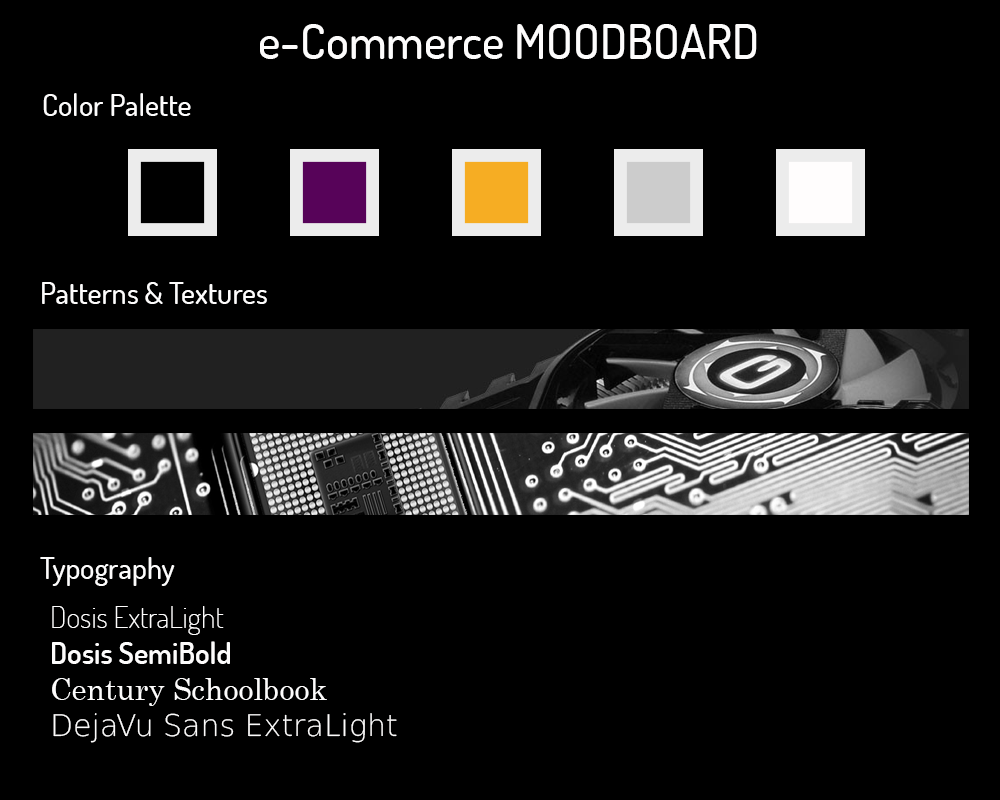
<style>
.page{position:relative;width:1000px;height:800px;background:#000000}
.page>*{position:absolute;margin:0}
.t1{font:48px "Dosis-Medium";color:#fdfcfc}
.t2{font:30px "Dosis-Medium";color:#fdfcfc}
.t3{font:30px "DejaVuSans-ExtraLight";color:#fdfcfc}
.t4{font:30px "Dosis-ExtraLight";color:#fdfcfc}
.t5{font:30px "Dosis-SemiBold";color:#fdfcfc}
.t6{font:30px "CenturySchoolbook";color:#fdfcfc}
</style>
<div class="page">
<p class="t1" style="left:260px;top:24px;width:497px;height:35px">e-Commerce MOODBOARD</p>
<p class="t2" style="left:43px;top:93px;width:148px;height:23px">Color Palette</p>
<p class="t2" style="left:42px;top:282px;width:225px;height:22px">Patterns &amp; Textures</p>
<p class="t2" style="left:40px;top:557px;width:135px;height:29px">Typography</p>
<p class="t3" style="left:52px;top:606px;width:345px;height:137px"><span class="t4">Dosis ExtraLight<br></span><span class="t5">Dosis SemiBold<br></span><span class="t6">Century Schoolbook<br></span>DejaVu Sans ExtraLight</p>
</div>
